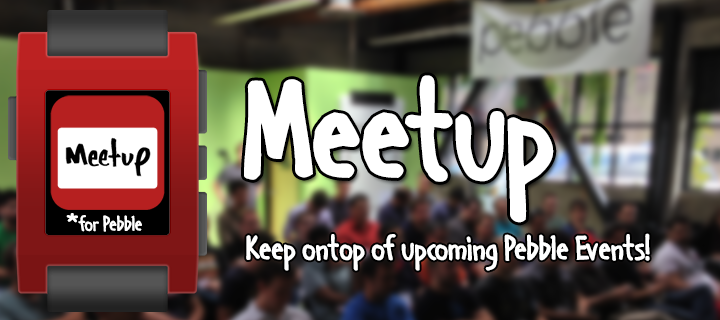
<style>
.page{position:relative;width:720px;height:320px}
.page>*{position:absolute;margin:0}
.t1{font:150px "HandageAOEBold";color:#ffffff}
.t2{font:22.9px "HandageAOEBold";color:#ffffff}
.t3{font:22.9px "ComicSansMS-Bold";color:#ffffff}
.t4{font:37.5px "HandageAOEBold";color:#ffffff}
</style>
<div class="page">
<p class="t1" style="left:244px;top:75px;width:310px;height:148px">Meetup</p>
<p class="t2" style="left:66px;top:213px;width:76px;height:19px"><span class="t3">*</span>for Pebble</p>
<p class="t4" style="left:246px;top:233px;width:404px;height:38px">Keep ontop of upcoming Pebble Events!</p>
</div>
